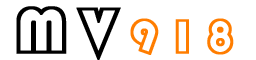
<style>
.page{position:relative;width:256px;height:60px;background:#ffffff}
.page>*{position:absolute;margin:0}
.t1{font:48px "STCaiyun";letter-spacing:0.2em;color:#ff7d00;font-weight:bold}
.t2{font:65px "STCaiyun";letter-spacing:0.2em;color:#000000;font-weight:bold}
</style>
<div class="page">
<p class="t1" style="left:16px;top:6px;width:218px;height:54px"><span class="t2">MV</span>918</p>
</div>
